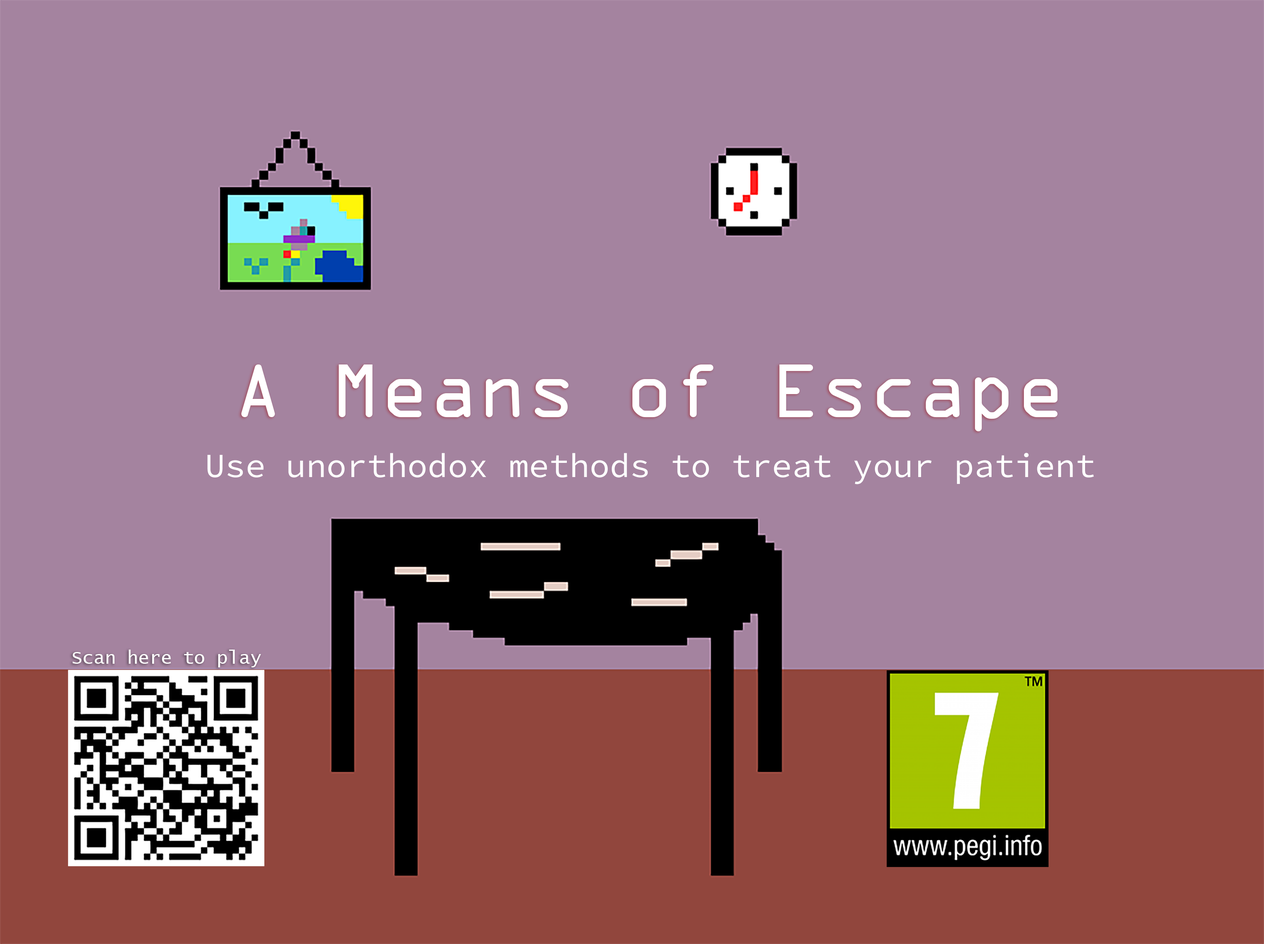
<style>
.page{position:relative;width:1264px;height:944px;background:#a4839f}
.page>*{position:absolute;margin:0}
.t1{font:81px "OCRAExtended";color:#ffffff}
.t2{font:33.7px "SourceCodeVariable-Roman";color:#ffffff}
.t3{font:18.6px "LucidaConsole";color:#ffffff}
</style>
<div class="page">
<p class="t1" style="left:241px;top:364px;width:816px;height:67px">A Means of Escape</p>
<p class="t2" style="left:207px;top:453px;width:887px;height:31px">Use unorthodox methods to treat your patient</p>
<p class="t3" style="left:72px;top:649px;width:189px;height:18px">Scan here to play</p>
</div>
